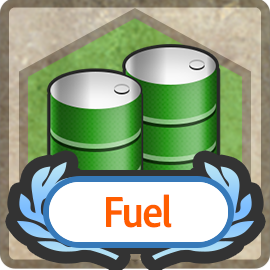
<style>
.page{position:relative;width:270px;height:270px}
.page>*{position:absolute;margin:0}
.t1{font:45px "AdobeClean-Bold";letter-spacing:-0.04em;color:#ff5d00;scale:0.9 1}
</style>
<div class="page">
<p class="t1" style="left:106px;top:194px;width:66px;height:34px">Fuel</p>
</div>
